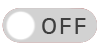
<style>
.page{position:relative;width:100px;height:50px;background:#ffffff}
.page>*{position:absolute;margin:0}
.t1{font:21.7px "AntiqueOlive";letter-spacing:0.1em;color:#3f3f3f}
</style>
<div class="page">
<p class="t1" style="left:42px;top:18px;width:44px;height:16px">OFF</p>
</div>
